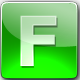
<style>
.page{position:relative;width:80px;height:80px}
.page>*{position:absolute;margin:0}
.t1{font:68.9px "Verdana-Bold";text-transform:uppercase}
</style>
<div class="page">
<p class="t1" style="left:20px;top:15px;width:37px;height:51px">F</p>
</div>
